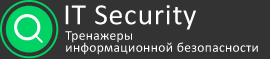
<style>
.page{position:relative;width:270px;height:59px;background:#333333}
.page>*{position:absolute;margin:0}
.t1{font:29.5px "Calibri";letter-spacing:0.025em;color:#ffffff}
.t2{font:13.4px "Calibri";letter-spacing:0.025em;color:#ffffff}
</style>
<div class="page">
<p class="t1" style="left:65px;top:5px;width:131px;height:25px">IT Security</p>
<p class="t2" style="left:65px;top:31px;width:193px;height:24px">Тренажеры <br>информационной безопасности</p>
</div>
